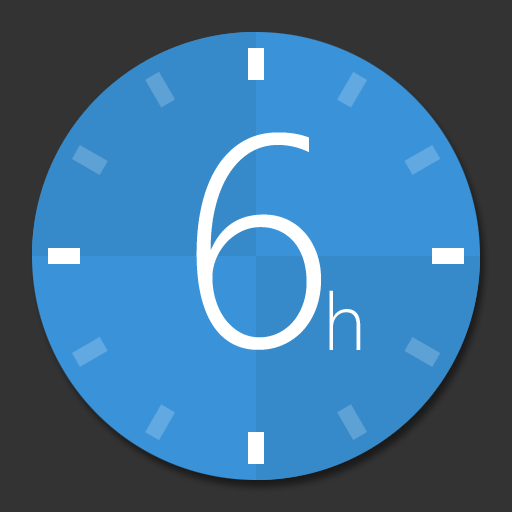
<style>
.page{position:relative;width:512px;height:512px;background:#333333}
.page>*{position:absolute;margin:0}
.t1{font:300px "SegoeWP-Light";color:#ffffff}
.t2{font:80px "SegoeWP-Light";color:#ffffff}
</style>
<div class="page">
<p class="t1" style="left:196px;top:132px;width:125px;height:218px">6</p>
<p class="t2" style="left:329px;top:290px;width:32px;height:60px">h</p>
</div>
